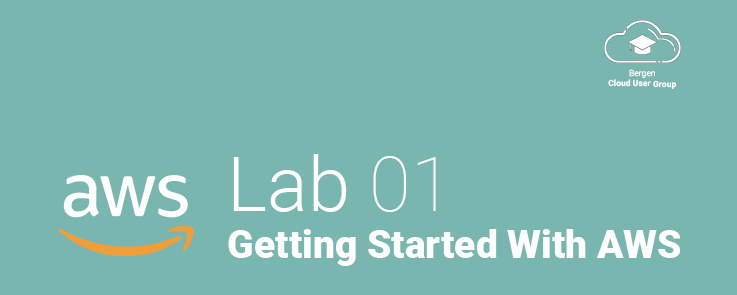
<style>
.page{position:relative;width:737px;height:295px;background:#78b6af}
.page>*{position:absolute;margin:0}
.t1{font:8.6px "Roboto-Bold";color:#ffffff}
.t2{font:8.6px "Roboto-Light";color:#ffffff}
.t3{font:39px "Roboto-Black";color:#ffffff}
.t4{font:76px "Roboto-Light";color:#ffffff}
.t5{font:76px "Roboto-Thin";color:#ffffff}
</style>
<div class="page">
<p class="t1" style="left:608px;top:69px;width:69px;height:20px;text-align:center"><span class="t2">Bergen<br></span>Cloud User Group</p>
<p class="t3" style="left:228px;top:154px;width:453px;height:112px"><span class="t4">Lab </span><span class="t5">01<br></span>Getting Started With AWS</p>
</div>
